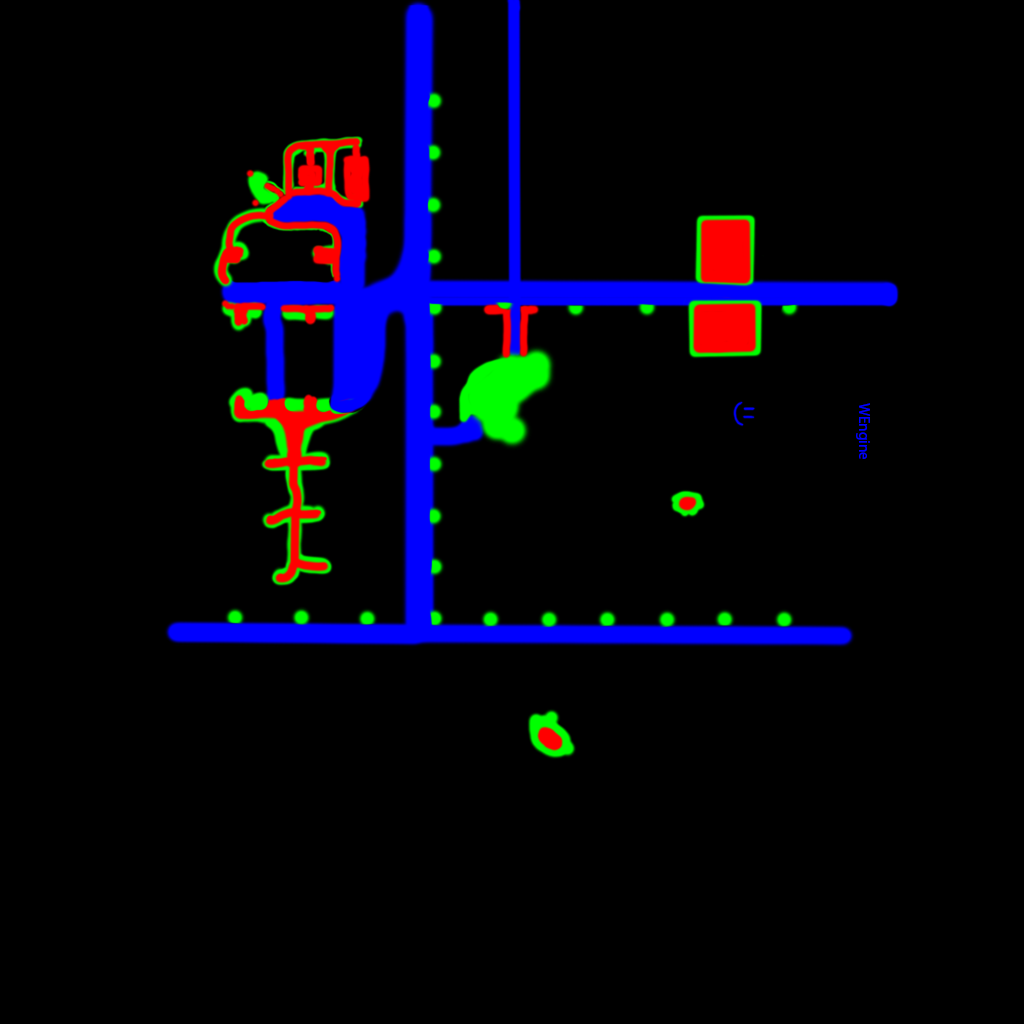
<style>
.page{position:relative;width:1024px;height:1024px;background:#000000}
.page>*{position:absolute;margin:0}
.t1{font:15.6px "MyriadPro-Regular";color:#0000ff}
</style>
<div class="page">
<p class="t1" style="left:856px;top:403px;width:14px;height:56px;rotate:90deg">WEngine</p>
</div>
